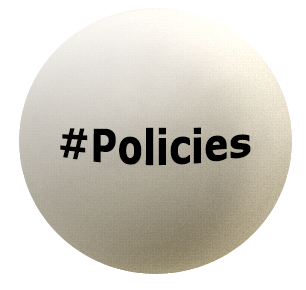
<style>
.page{position:relative;width:306px;height:290px;background:#ffffff}
.page>*{position:absolute;margin:0}
.t1{font:37.5px "Verdana-Bold";color:#000000}
</style>
<div class="page">
<p class="t1" style="left:60px;top:127px;width:191px;height:39px">#Policies</p>
</div>
